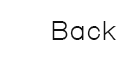
<style>
.page{position:relative;width:140px;height:61px;background:#ffffff}
.page>*{position:absolute;margin:0}
.t1{font:27px "Aliquam";letter-spacing:0.1em;color:#101010}
</style>
<div class="page">
<p class="t1" style="left:52px;top:21px;width:64px;height:19px">Back</p>
</div>
